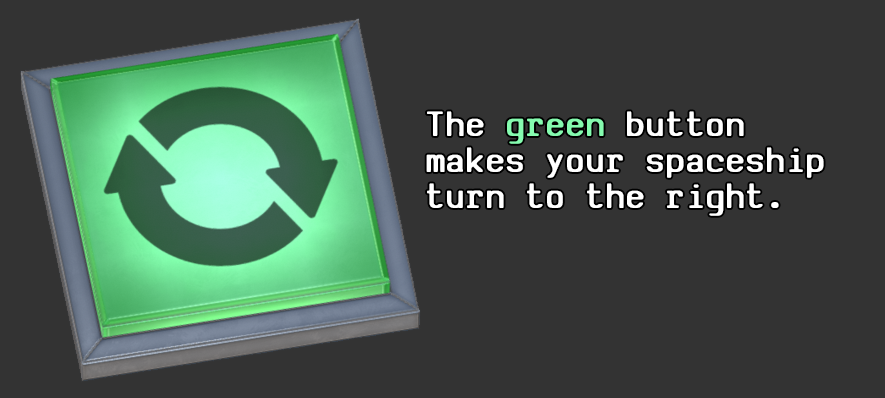
<style>
.page{position:relative;width:885px;height:398px;background:#333333}
.page>*{position:absolute;margin:0}
.t1{font:37.8px/36px "SVBasicManual-Bold";letter-spacing:0.05em;color:#ffffff;scale:0.95 1}
.t2{font:37.8px/36px "SVBasicManual-Bold";letter-spacing:0.05em;color:#85fbaf;scale:0.95 1}
</style>
<div class="page">
<p class="t1" style="left:426px;top:111px;width:398px;height:105px">The <span class="t2">green</span> button <br>makes your spaceship <br>turn to the right.</p>
</div>
